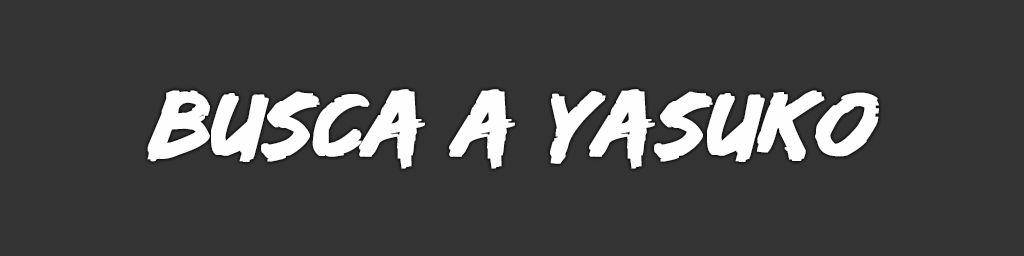
<style>
.page{position:relative;width:1024px;height:256px;background:#333333}
.page>*{position:absolute;margin:0}
.t1{font:94px "EdoSZ";color:#fefefe;font-weight:bold;font-style:italic;scale:1.04 1}
</style>
<div class="page">
<p class="t1" style="left:147px;top:89px;width:732px;height:80px">busca a yasuko</p>
</div>
